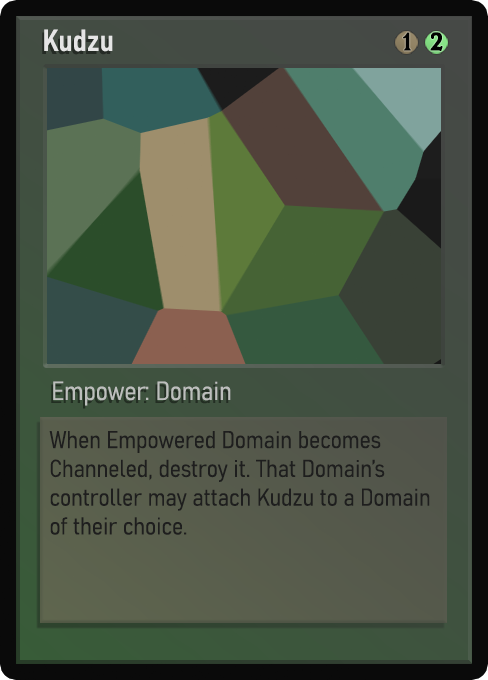
<style>
.page{position:relative;width:488px;height:680px}
.page>*{position:absolute;margin:0}
.t1{font:30px "Bahnschrift-SemiBoldSemiCondensed";color:#f2f2f2;font-weight:bold}
.t2{font:25px "WTRRoycroft";color:#000000;font-weight:bold;scale:1.09 1}
.t3{font:26px "Bahnschrift-LightSemiCondensed";color:#c8c8c8;font-weight:bold}
.t4{font:24px "Bahnschrift-LightSemiCondensed";color:#1e1e1e;font-weight:bold}
</style>
<div class="page">
<p class="t1" style="left:44px;top:29px;width:69px;height:23px;opacity:0.9">Kudzu</p>
<p class="t2" style="left:403px;top:32px;width:8px;height:19px">1</p>
<p class="t2" style="left:430px;top:32px;width:13px;height:19px">2</p>
<p class="t3" style="left:53px;top:381px;width:178px;height:25px;opacity:0.9">Empower: Domain</p>
<p class="t4" style="left:49px;top:431px;width:381px;height:104px">When Empowered Domain becomes Channeled, destroy it. That Domain’s controller may attach Kudzu to a Domain of their choice.</p>
</div>
